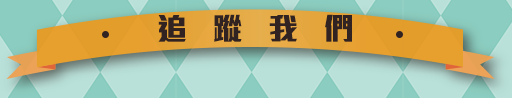
<style>
.page{position:relative;width:512px;height:98px}
.page>*{position:absolute;margin:0}
.t1{font:30.6px "MStiffHeiHK-UltraBold";letter-spacing:0.84em;color:#322323}
</style>
<div class="page">
<p class="t1" style="left:158px;top:14px;width:194px;height:28px">追蹤我們</p>
</div>
